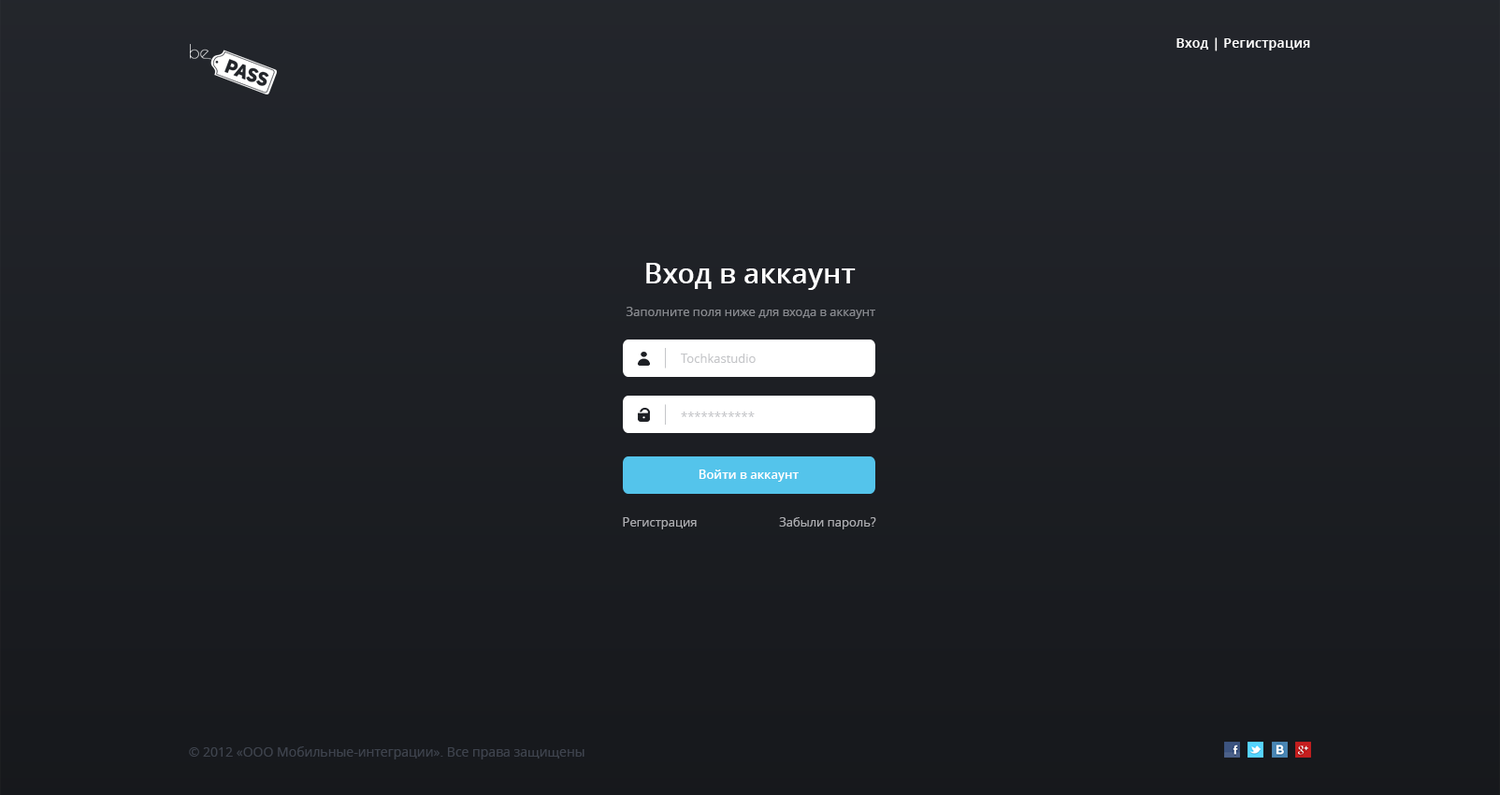
<style>
.page{position:relative;width:1500px;height:795px}
.page>*{position:absolute;margin:0}
.t1{font:13.1px "OpenSans-Semibold";letter-spacing:0.02em;color:#ffffff}
.t2{font:28.1px "OpenSans-Semibold";color:#ffffff}
.t3{font:12.2px "OpenSans";color:#888a8f}
.t4{font:12.2px "OpenSans";color:#c5c6c9}
.t5{font:12.2px "OpenSans-Semibold";color:#ffffff}
.t6{font:12.2px "OpenSans";color:#abacb0}
.t7{font:13.1px "OpenSans";color:#3e434d}
.t8{font:13.1px "OpenSans";color:#3e434d;text-decoration:underline}
</style>
<div class="page">
<p class="t1" style="left:1176px;top:37px;width:134px;height:14px">Вход | Регистрация</p>
<p class="t2" style="left:646px;top:263px;width:210px;height:27px">Вход в аккаунт</p>
<p class="t3" style="left:626px;top:307px;width:249px;height:12px">Заполните поля ниже для входа в аккаунт</p>
<p class="t4" style="left:681px;top:354px;width:75px;height:9px">Tochkastudio</p>
<p class="t4" style="left:681px;top:411px;width:74px;height:6px">***********</p>
<p class="t5" style="left:699px;top:469px;width:100px;height:13px">Войти в аккаунт</p>
<p class="t6" style="left:623px;top:517px;width:74px;height:12px">Регистрация</p>
<p class="t6" style="left:779px;top:517px;width:97px;height:12px">Забыли пароль?</p>
<p class="t7" style="left:189px;top:746px;width:396px;height:13px"><span class="t8"><br></span>© 2012 «ООО Мобильные-интеграции». Все права защищены</p>
</div>
